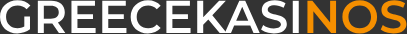
<style>
.page{position:relative;width:407px;height:34px;background:#333333}
.page>*{position:absolute;margin:0}
.t1{font:46px "Montserrat-SemiBold";color:#ffffff}
.t2{font:46px "Montserrat-SemiBold";color:#f58f00}
</style>
<div class="page">
<p class="t1" style="left:0px;top:0px;width:407px;height:34px">GREECEKASI<span class="t2">NOS</span></p>
</div>
